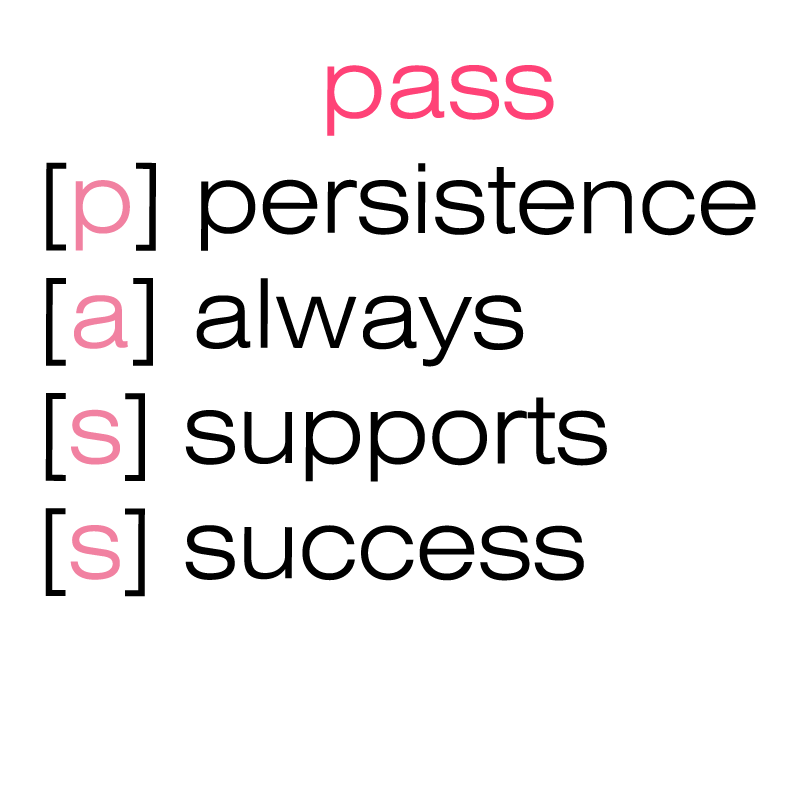
<style>
.page{position:relative;width:800px;height:800px;background:#ffffff}
.page>*{position:absolute;margin:0}
.t1{font:96px "Swiss721BT-LightExtended";color:#000000}
.t2{font:40px "Swiss721BT-LightCondensed";color:#00baff}
.t3{font:96px "Swiss721BT-LightExtended";color:#ff4277}
.t4{font:96px "Swiss721BT-LightExtended";color:#f181a1}
</style>
<div class="page">
<p class="t1" style="left:45px;top:65px;width:711px;height:532px"><span class="t2">          </span><span class="t3">pass<br></span>[<span class="t4">p</span>] persistence<br>[<span class="t4">a</span>] always<br>[<span class="t4">s</span>] supports<br>[<span class="t4">s</span>] success</p>
</div>
